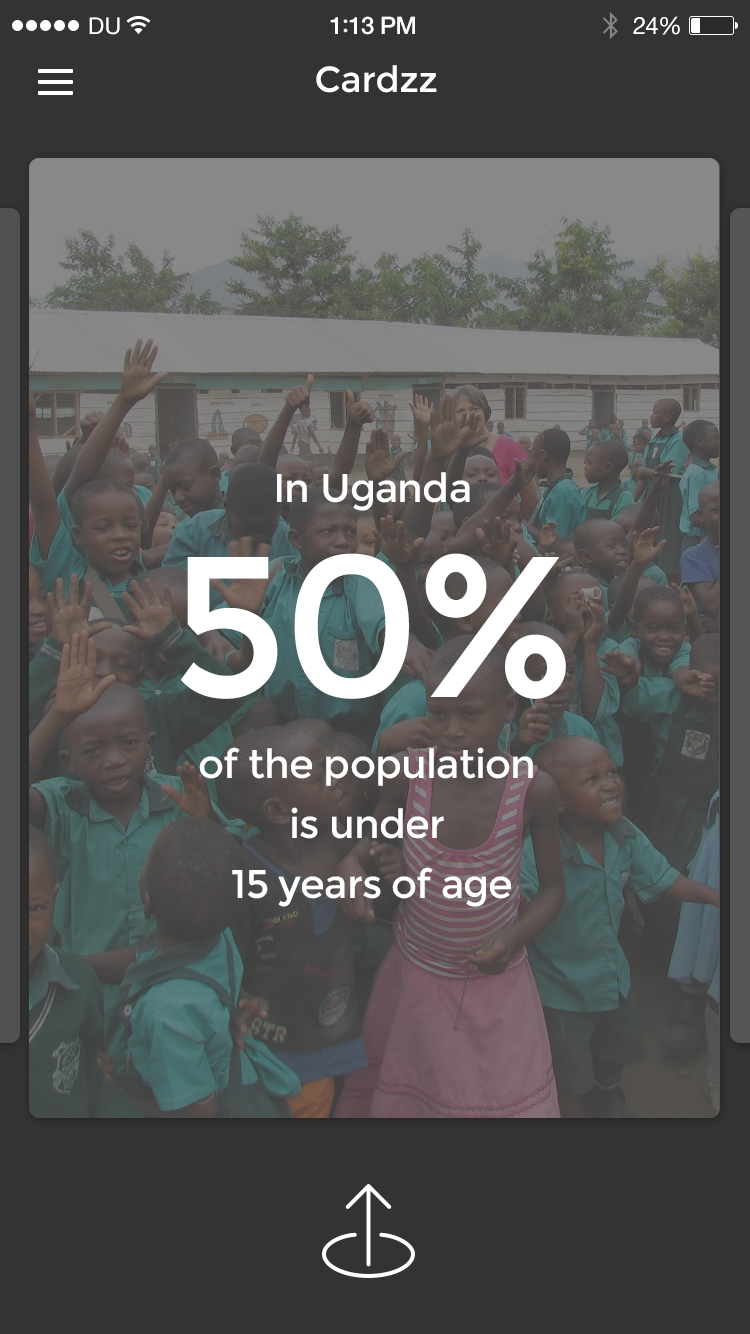
<style>
.page{position:relative;width:750px;height:1334px;background:#333333}
.page>*{position:absolute;margin:0}
.t1{font:23px "HelveticaNeue";letter-spacing:0.02em;color:#ffffff}
.t2{font:24px "HelveticaNeue-Medium";letter-spacing:-0.02em;color:#ffffff}
.t3{font:26px "Avenir-Medium";letter-spacing:-0.02em;color:#ffffff}
.t4{font:24px "HelveticaNeue";letter-spacing:-0.02em;color:#ffffff}
.t5{font:36px "Montserrat-Regular";color:#ffffff}
.t6{font:40px "Montserrat-Regular";letter-spacing:-0.02em;color:#ffffff}
.t7{font:200px "Montserrat-Regular";letter-spacing:-0.02em;color:#ffffff}
.t8{font:40px/60px "Montserrat-Regular";letter-spacing:-0.02em;color:#ffffff}
</style>
<div class="page">
<p class="t1" style="left:89px;top:17px;width:31px;height:18px">DU</p>
<p class="t2" style="left:330px;top:16px;width:85px;height:19px">1<span class="t3">:</span>13 PM</p>
<p class="t4" style="left:633px;top:16px;width:47px;height:19px">24%</p>
<p class="t5" style="left:316px;top:65px;width:121px;height:28px">Cardzz</p>
<p class="t6" style="left:277px;top:472px;width:193px;height:39px">In Uganda</p>
<p class="t7" style="left:181px;top:553px;width:385px;height:146px">50%</p>
<p class="t8" style="left:199px;top:747px;width:334px;height:160px;text-align:center">of the population <br>is under <br>15 years of age</p>
</div>
